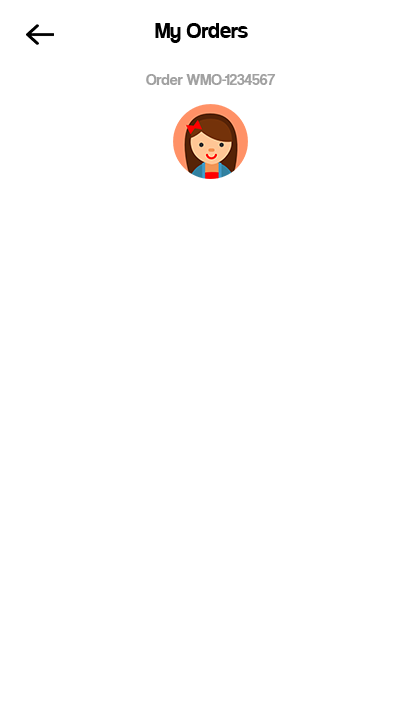
<style>
.page{position:relative;width:420px;height:720px;background:#ffffff}
.page>*{position:absolute;margin:0}
.t1{font:24px "Coolvetica-Regular";color:#000000}
.t2{font:16px "CoolveticaRg-Regular";color:#a1a1a1}
</style>
<div class="page">
<p class="t1" style="left:155px;top:23px;width:93px;height:20px">My Orders</p>
<p class="t2" style="left:146px;top:74px;width:130px;height:11px">Order WMO-1234567</p>
</div>
